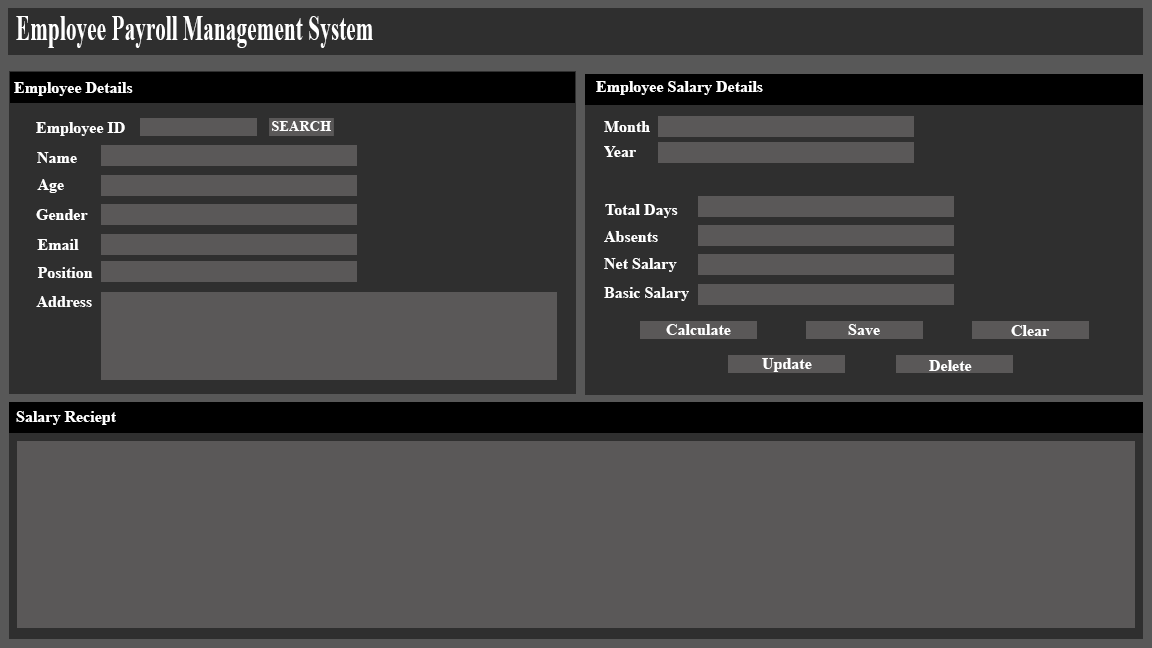
<style>
.page{position:relative;width:1152px;height:648px;background:#5a5858}
.page>*{position:absolute;margin:0}
.t1{font:36.2px "TimesNewRomanPS-BoldMT";color:#ffffff;scale:0.59 1}
.t2{font:16px "TimesNewRomanPS-BoldMT";color:#ffffff}
.t3{font:14.5px "TimesNewRomanPS-BoldMT";color:#ffffff}
</style>
<div class="page">
<p class="t1" style="left:16px;top:16px;width:357px;height:32px">Employee Payroll Management System</p>
<p class="t2" style="left:14px;top:82px;width:119px;height:14px">Employee Details</p>
<p class="t2" style="left:596px;top:81px;width:167px;height:14px">Employee Salary Details</p>
<p class="t2" style="left:36px;top:122px;width:89px;height:14px">Employee ID</p>
<p class="t3" style="left:272px;top:121px;width:59px;height:10px">SEARCH</p>
<p class="t2" style="left:604px;top:121px;width:46px;height:11px">Month</p>
<p class="t2" style="left:604px;top:146px;width:32px;height:11px">Year</p>
<p class="t2" style="left:37px;top:152px;width:40px;height:11px">Name</p>
<p class="t2" style="left:37px;top:179px;width:27px;height:14px">Age</p>
<p class="t2" style="left:36px;top:209px;width:52px;height:11px">Gender</p>
<p class="t2" style="left:605px;top:204px;width:73px;height:14px">Total Days</p>
<p class="t2" style="left:604px;top:231px;width:54px;height:11px">Absents</p>
<p class="t2" style="left:37px;top:239px;width:42px;height:11px">Email</p>
<p class="t2" style="left:37px;top:267px;width:56px;height:11px">Position</p>
<p class="t2" style="left:604px;top:258px;width:73px;height:14px">Net Salary</p>
<p class="t2" style="left:604px;top:287px;width:85px;height:14px">Basic Salary</p>
<p class="t2" style="left:36px;top:296px;width:56px;height:11px">Address</p>
<p class="t2" style="left:666px;top:324px;width:65px;height:11px">Calculate</p>
<p class="t2" style="left:848px;top:324px;width:32px;height:11px">Save</p>
<p class="t2" style="left:1011px;top:325px;width:38px;height:11px">Clear</p>
<p class="t2" style="left:762px;top:358px;width:50px;height:14px">Update</p>
<p class="t2" style="left:929px;top:360px;width:43px;height:11px">Delete</p>
<p class="t2" style="left:16px;top:411px;width:100px;height:14px">Salary Reciept</p>
</div>
